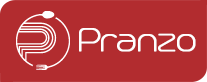
<style>
.page{position:relative;width:207px;height:82px;background:#b22c2f}
.page>*{position:absolute;margin:0}
.t1{font:41.1px "Trench-Thin";letter-spacing:-0.06em;color:#ffffff;font-weight:bold}
</style>
<div class="page">
<p class="t1" style="left:79px;top:28px;width:117px;height:24px">Pranzo</p>
</div>
